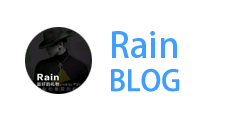
<style>
.page{position:relative;width:240px;height:120px;background:#ffffff}
.page>*{position:absolute;margin:0}
.t1{font:35.1px "AdobeHeitiStd-Regular";color:#409eff}
.t2{font:28.5px "AdobeHeitiStd-Regular";color:#409eff}
</style>
<div class="page">
<p class="t1" style="left:112px;top:31px;width:65px;height:27px">Rain</p>
<p class="t2" style="left:111px;top:68px;width:69px;height:24px">BLOG</p>
</div>
